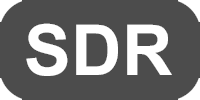
<style>
.page{position:relative;width:200px;height:100px;background:#4c4c4c}
.page>*{position:absolute;margin:0}
.t1{font:70px "Arial-BoldMT";color:#ffffff}
</style>
<div class="page">
<p class="t1" style="left:26px;top:23px;width:146px;height:53px">SDR</p>
</div>
